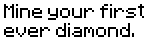
<style>
.page{position:relative;width:168px;height:42px;background:#ffffff}
.page>*{position:absolute;margin:0}
.t1{font:16px "Minecraftia-Regular";color:#000000}
</style>
<div class="page">
<p class="t1" style="left:4px;top:4px;width:140px;height:33px">Mine your first <br>ever diamond.</p>
</div>
